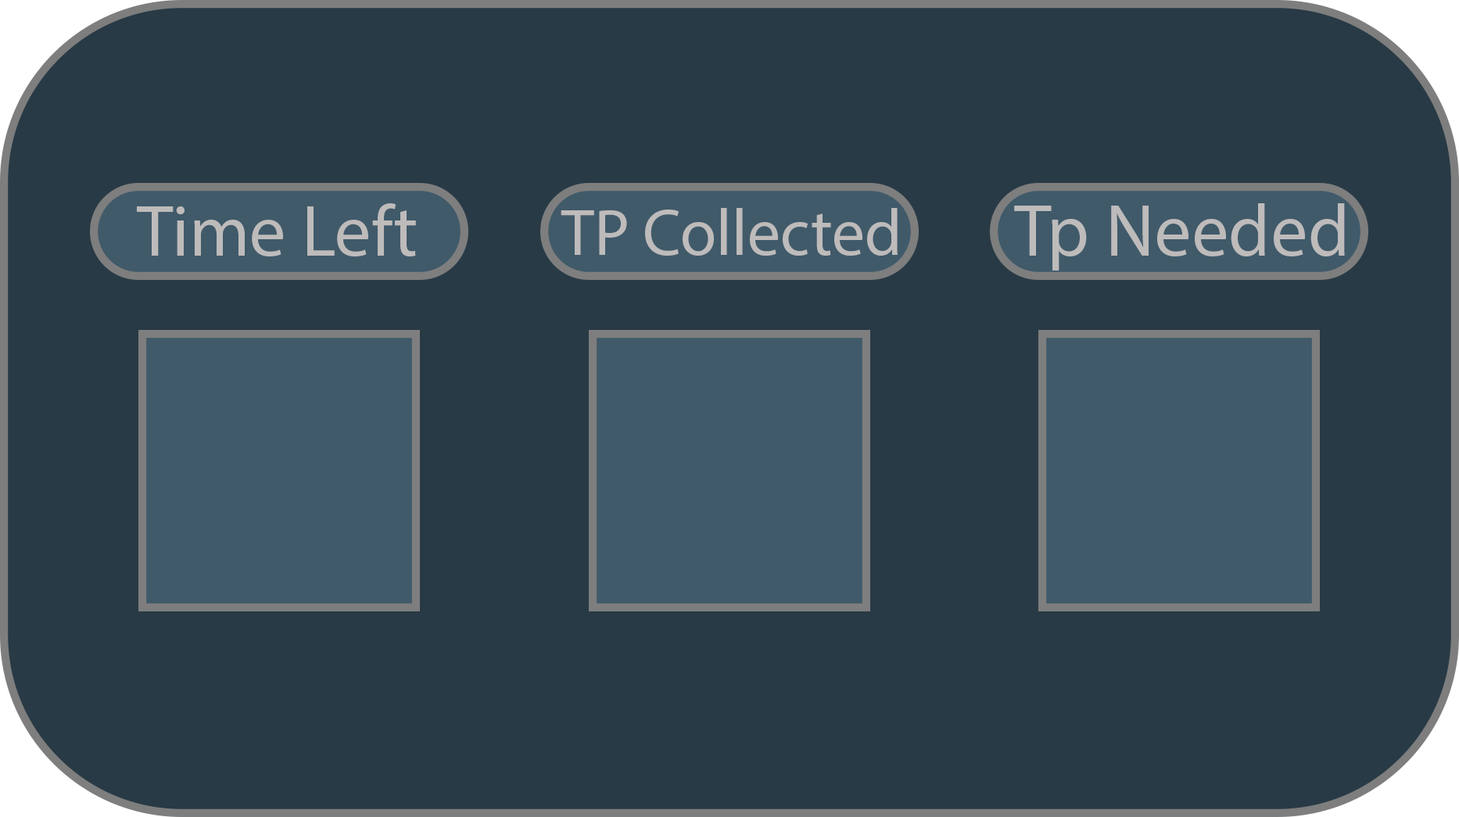
<style>
.page{position:relative;width:1459px;height:817px;background:#283a45}
.page>*{position:absolute;margin:0}
.t1{font:72.7px "MyriadPro-Regular";color:#bebbbb}
.t2{font:65.7px "MyriadPro-Regular";color:#bebbbb}
.t3{font:74.3px "MyriadPro-Regular";color:#bebbbb}
</style>
<div class="page">
<p class="t1" style="left:137px;top:203px;width:279px;height:53px">Time Left</p>
<p class="t2" style="left:561px;top:208px;width:337px;height:48px">TP Collected</p>
<p class="t3" style="left:1014px;top:203px;width:331px;height:68px">Tp Needed</p>
</div>
